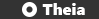
<style>
.page{position:relative;width:99px;height:19px;background:#333333}
.page>*{position:absolute;margin:0}
.t1{font:16px "SegoeUIBlack";color:#ffffff}
</style>
<div class="page">
<p class="t1" style="left:42px;top:3px;width:43px;height:12px">Theia</p>
</div>
